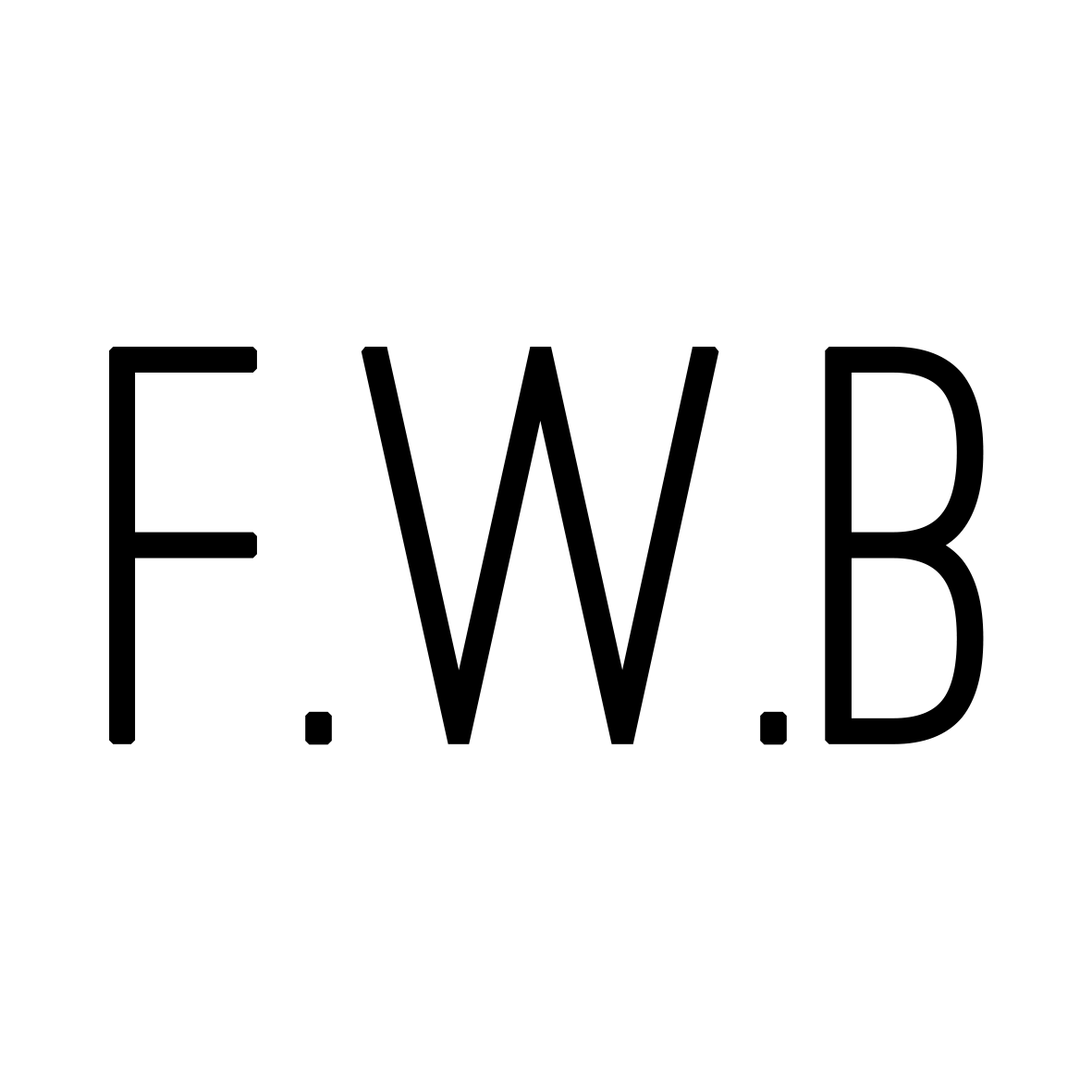
<style>
.page{position:relative;width:1092px;height:1092px;background:#ffffff}
.page>*{position:absolute;margin:0}
.t1{font:577.9px "OstrichSans-Medium";color:#000000;font-weight:bold}
</style>
<div class="page">
<p class="t1" style="left:109px;top:346px;width:875px;height:399px">f.w.b</p>
</div>
